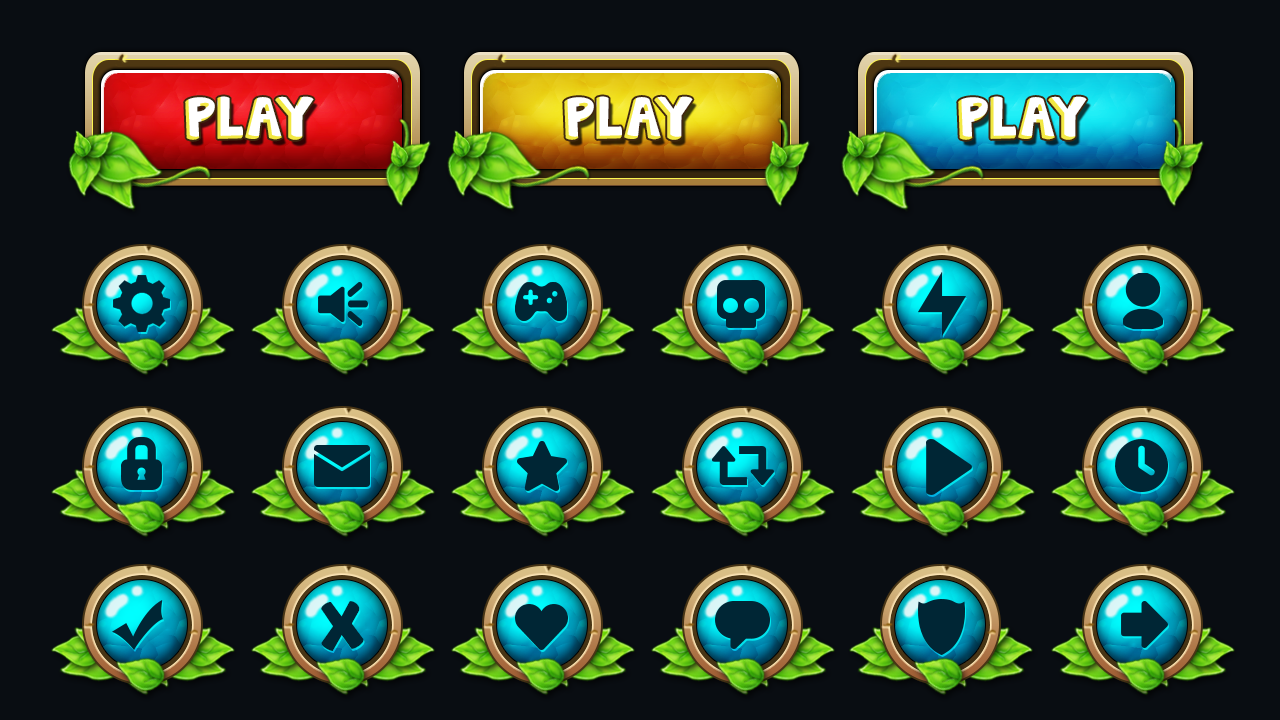
<style>
.page{position:relative;width:1280px;height:720px;background:#090d12}
.page>*{position:absolute;margin:0}
.t1{font:52.4px "JandaManateeSolid";color:#ffffff;text-transform:uppercase}
.t2{font:60.1px "JandaManateeSolid";color:#002635}
</style>
<div class="page">
<p class="t1" style="left:185px;top:96px;width:129px;height:44px">Play</p>
<p class="t1" style="left:564px;top:96px;width:129px;height:44px">Play</p>
<p class="t1" style="left:958px;top:96px;width:129px;height:44px">Play</p>
<p class="t2" style="left:321px;top:601px;width:43px;height:50px">X</p>
</div>
